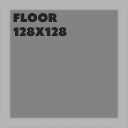
<style>
.page{position:relative;width:128px;height:128px;background:#838383}
.page>*{position:absolute;margin:0}
.t1{font:12px "AzoSansUber-Regular";color:#242424}
</style>
<div class="page">
<p class="t1" style="left:13px;top:13px;width:54px;height:24px">FLOOR<br>128x128</p>
</div>
